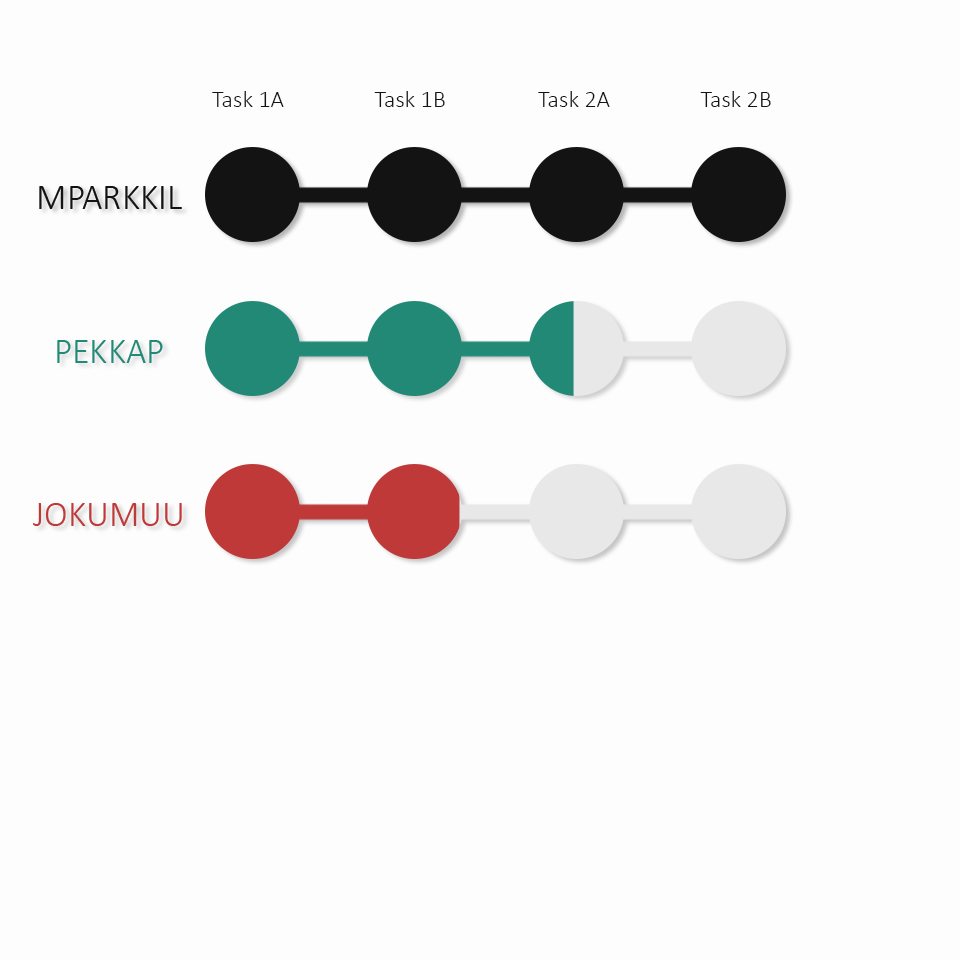
<style>
.page{position:relative;width:960px;height:960px;background:#fdfdfd}
.page>*{position:absolute;margin:0}
.t1{font:24px "Calibri-Light";color:#131313}
.t2{font:36px "Calibri-Light";color:#131313}
.t3{font:36px "Calibri-Light";color:#238977}
.t4{font:36px "Calibri-Light";color:#bf3939}
</style>
<div class="page">
<p class="t1" style="left:212px;top:91px;width:72px;height:16px">Task 1A</p>
<p class="t1" style="left:374px;top:91px;width:71px;height:16px">Task 1B</p>
<p class="t1" style="left:538px;top:91px;width:72px;height:16px">Task 2A</p>
<p class="t1" style="left:700px;top:91px;width:71px;height:16px">Task 2B</p>
<p class="t2" style="left:39px;top:186px;width:143px;height:23px">MPARKKIL</p>
<p class="t3" style="left:57px;top:340px;width:106px;height:23px">PEKKAP</p>
<p class="t4" style="left:33px;top:503px;width:149px;height:23px">JOKUMUU</p>
</div>
